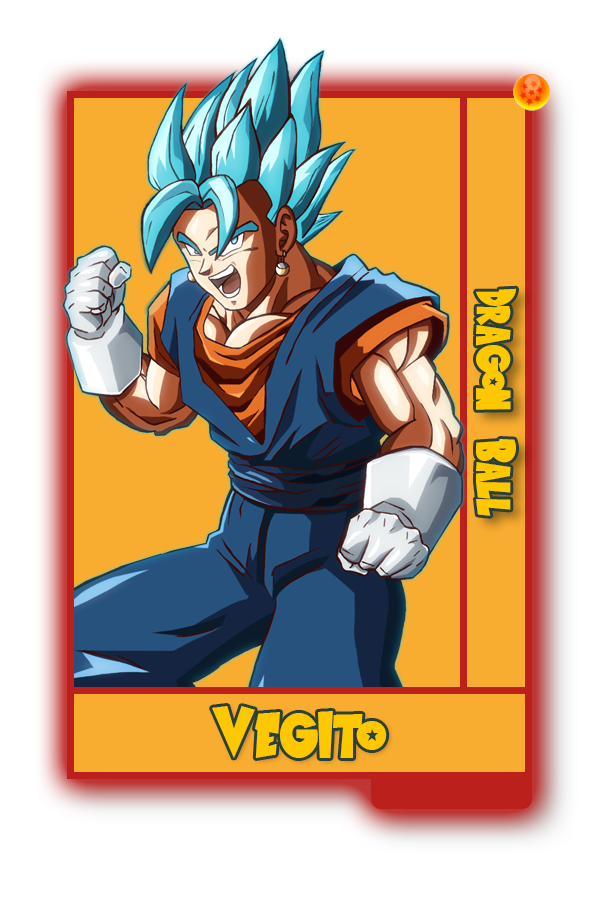
<style>
.page{position:relative;width:600px;height:900px;background:#ffffff}
.page>*{position:absolute;margin:0}
.t1{font:56.9px "SaiyanSans";color:#fec800}
.t2{font:75px "SaiyanSans";color:#fec800}
</style>
<div class="page">
<p class="t1" style="left:476px;top:288px;width:40px;height:228px;rotate:90deg">Dragon Ball</p>
<p class="t2" style="left:212px;top:706px;width:175px;height:52px">Vegito</p>
</div>
